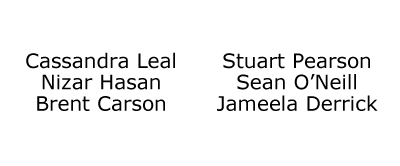
<style>
.page{position:relative;width:400px;height:166px;background:#ffffff}
.page>*{position:absolute;margin:0}
.t1{font:20px/21.3px "Verdana";color:#000000}
</style>
<div class="page">
<p class="t1" style="left:26px;top:52px;width:149px;height:59px;text-align:center">Cassandra Leal<br>Nizar Hasan<br>Brent Carson</p>
<p class="t1" style="left:217px;top:53px;width:161px;height:58px;text-align:center">Stuart Pearson<br>Sean O’Neill<br>Jameela Derrick</p>
</div>
